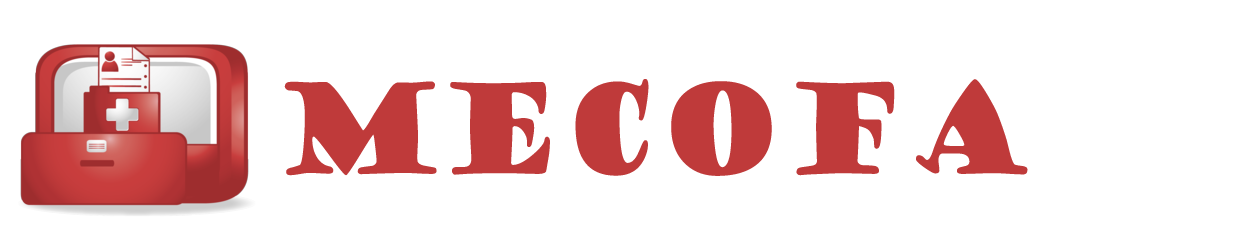
<style>
.page{position:relative;width:1250px;height:249px;background:#ffffff}
.page>*{position:absolute;margin:0}
.t1{font:122.1px "GoudyStout";color:#bf3a3a;scale:0.82 1}
</style>
<div class="page">
<p class="t1" style="left:284px;top:79px;width:744px;height:97px">MECOFA</p>
</div>
